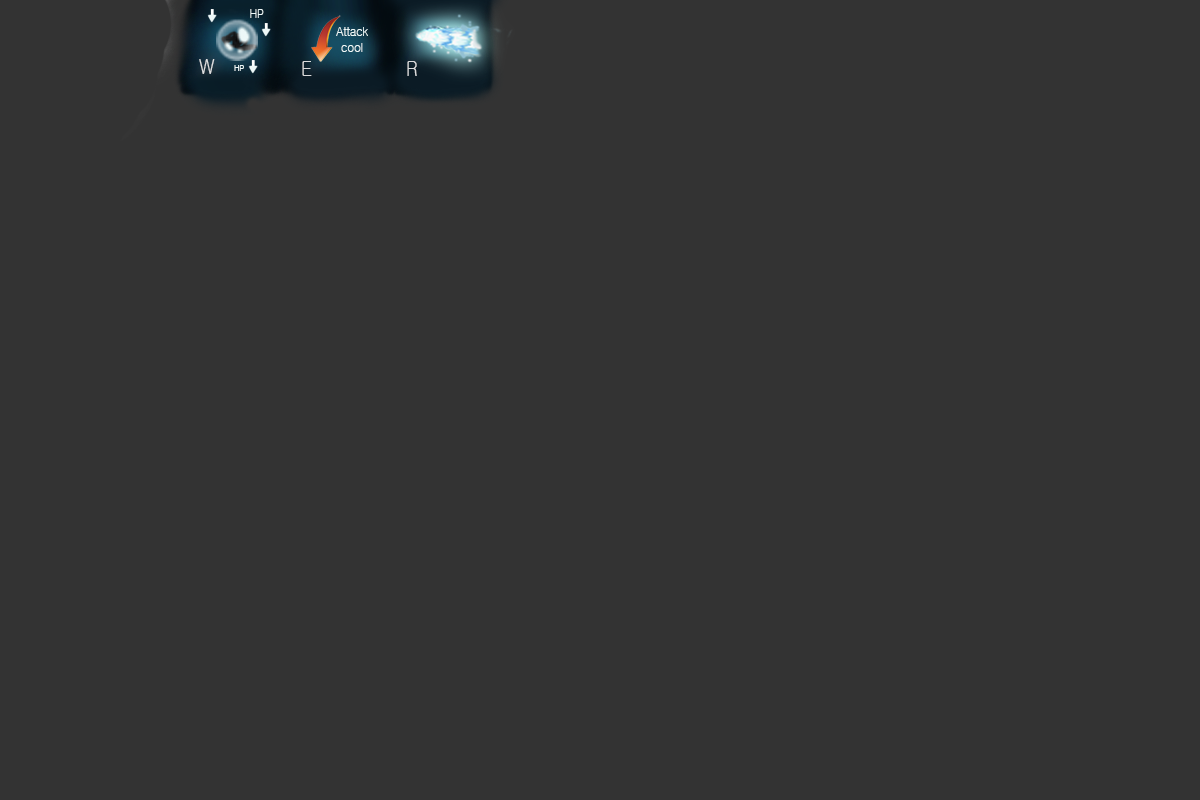
<style>
.page{position:relative;width:1200px;height:800px;background:#333333}
.page>*{position:absolute;margin:0}
.t1{font:11.9px "Gulim";letter-spacing:-0.03em;color:#edf8f8;scale:0.89 1}
.t2{font:13.1px "Gulim";letter-spacing:-0.03em;color:#edf8f8;scale:0.89 1}
.t3{font:20.8px "Gulim";letter-spacing:-0.03em;color:#dbddde;scale:0.83 1}
.t4{font:8.9px "Gulim";letter-spacing:-0.03em;color:#edf8f8;scale:0.86 1}
.t5{font:20.8px "Gulim";letter-spacing:-0.03em;color:#dbdcdd;scale:0.83 1}
.t6{font:20.8px "Gulim";letter-spacing:-0.03em;color:#dadbdc;scale:0.83 1}
</style>
<div class="page">
<p class="t1" style="left:250px;top:9px;width:14px;height:9px">HP</p>
<p class="t2" style="left:336px;top:27px;width:32px;height:25px;text-align:center">Attack<br>cool</p>
<p class="t3" style="left:199px;top:59px;width:16px;height:15px">W</p>
<p class="t4" style="left:234px;top:65px;width:10px;height:6px">HP</p>
<p class="t5" style="left:302px;top:61px;width:10px;height:15px">E</p>
<p class="t6" style="left:407px;top:61px;width:10px;height:15px">R</p>
</div>
